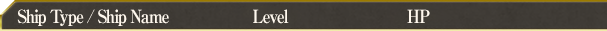
<style>
.page{position:relative;width:607px;height:31px}
.page>*{position:absolute;margin:0}
.t1{font:18px "RyuminPro-ExBold";letter-spacing:-0.08em;color:#fff8ee;scale:0.9 1}
</style>
<div class="page">
<p class="t1" style="left:17px;top:9px;width:152px;height:17px">Ship Type / Ship Name</p>
<p class="t1" style="left:253px;top:9px;width:36px;height:15px">Level</p>
<p class="t1" style="left:407px;top:9px;width:23px;height:14px">HP</p>
</div>
